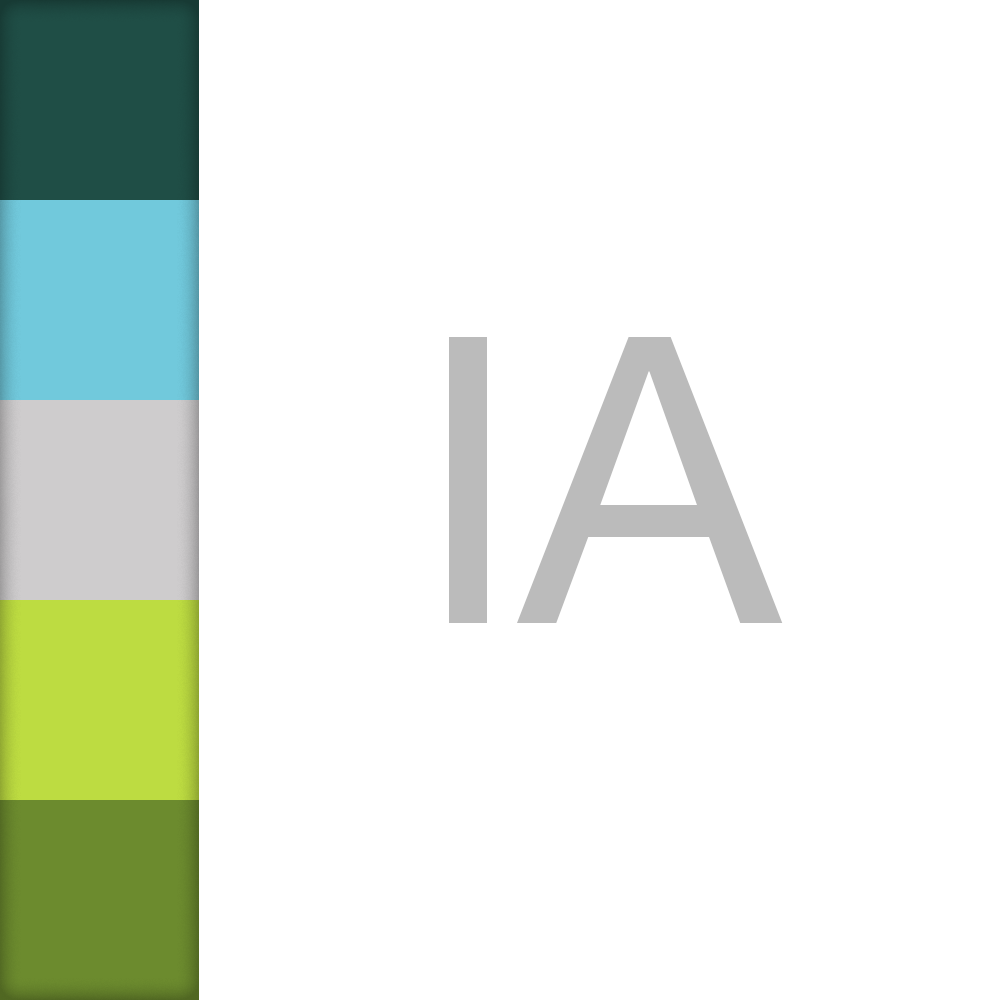
<style>
.page{position:relative;width:1000px;height:1000px;background:#ffffff}
.page>*{position:absolute;margin:0}
.t1{font:400.4px "HelveticaNeueLTStd-Roman";color:#bbbbbb}
</style>
<div class="page">
<p class="t1" style="left:449px;top:337px;width:334px;height:286px">IA</p>
</div>
